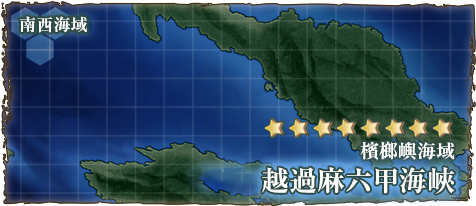
<style>
.page{position:relative;width:476px;height:206px}
.page>*{position:absolute;margin:0}
.t1{font:17px "RyuminPr6N-ExBold";color:#ffffff}
.t2{font:19px "RyuminPro-ExBold";color:#ffffff}
.t3{font:28px "RyuminPro-ExBold";color:#ffffff}
</style>
<div class="page">
<p class="t1" style="left:19px;top:16px;width:68px;height:17px">南西海域</p>
<p class="t2" style="left:360px;top:141px;width:95px;height:19px">檳榔嶼海域</p>
<p class="t3" style="left:262px;top:167px;width:193px;height:27px">越過麻六甲海峽</p>
</div>
